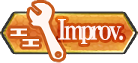
<style>
.page{position:relative;width:138px;height:63px;background:#ffffff}
.page>*{position:absolute;margin:0}
.t1{font:28px "RyuminPro-ExBold";letter-spacing:-0.16em;color:#fff6f2;scale:0.85 1}
</style>
<div class="page">
<p class="t1" style="left:58px;top:19px;width:65px;height:25px">Improv.</p>
</div>
